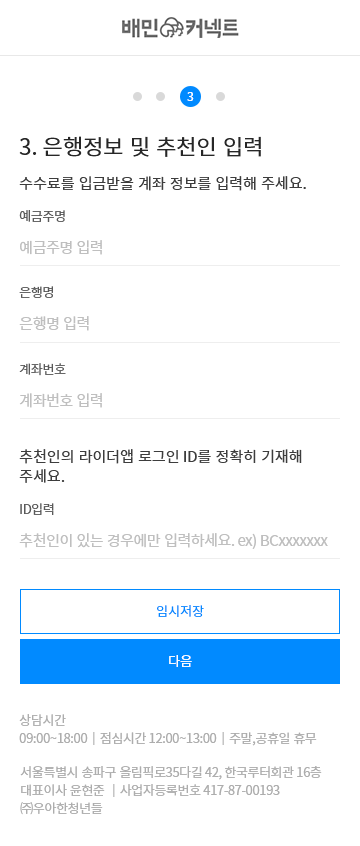
<style>
.page{position:relative;width:360px;height:846px;background:#ffffff}
.page>*{position:absolute;margin:0}
.t1{font:11.8px "NotoSansCJKkr-Regular";color:#ffffff}
.t2{font:22px "NotoSansCJKkr-Regular";color:#272727}
.t3{font:15px "NotoSansCJKkr-Regular";color:#3d3d3d}
.t4{font:13px "NotoSansCJKkr-Regular";letter-spacing:-0.03em;color:#595959}
.t5{font:15px "NotoSansCJKkr-Regular";letter-spacing:-0.03em;color:#bfbfbf}
.t6{font:15px/20px "NotoSansCJKkr-Regular";color:#3d3d3d}
.t7{font:13px "NotoSansCJKkr-Regular";color:#018aff}
.t8{font:13px "NotoSansCJKkr-Regular";color:#ffffff}
.t9{font:13px/18px "NotoSansCJKkr-Regular";letter-spacing:-0.03em;color:#adadad}
</style>
<div class="page">
<p class="t1" style="left:187px;top:92px;width:7px;height:9px">3</p>
<p class="t2" style="left:19px;top:136px;width:242px;height:21px">3. 은행정보 및 추천인 입력</p>
<p class="t3" style="left:19px;top:176px;width:287px;height:15px">수수료를 입금받을 계좌 정보를 입력해 주세요.</p>
<p class="t4" style="left:19px;top:210px;width:46px;height:12px">예금주명</p>
<p class="t5" style="left:20px;top:240px;width:82px;height:15px">예금주명 입력</p>
<p class="t4" style="left:19px;top:286px;width:34px;height:12px">은행명</p>
<p class="t5" style="left:19px;top:316px;width:70px;height:15px">은행명 입력</p>
<p class="t4" style="left:19px;top:363px;width:47px;height:13px">계좌번호</p>
<p class="t5" style="left:19px;top:393px;width:83px;height:15px">계좌번호 입력</p>
<p class="t6" style="left:19px;top:449px;width:283px;height:34px">추천인의 라이더앱 로그인 ID를 정확히 기재해 <br>주세요.</p>
<p class="t4" style="left:20px;top:503px;width:34px;height:12px">ID입력</p>
<p class="t5" style="left:19px;top:533px;width:309px;height:16px">추천인이 있는 경우에만 입력하세요. ex) BCxxxxxxx</p>
<p class="t7" style="left:157px;top:605px;width:47px;height:12px">임시저장</p>
<p class="t8" style="left:169px;top:655px;width:23px;height:12px">다음</p>
<p class="t9" style="left:19px;top:714px;width:298px;height:32px">상담시간 <br>09:00~18:00│점심시간 12:00~13:00│주말,공휴일 휴무</p>
<p class="t9" style="left:20px;top:766px;width:302px;height:49px">서울특별시 송파구 올림픽로35다길 42, 한국루터회관 16층 <br>대표이사 윤현준 │사업자등록번호 417-87-00193<br>㈜우아한청년들</p>
</div>
